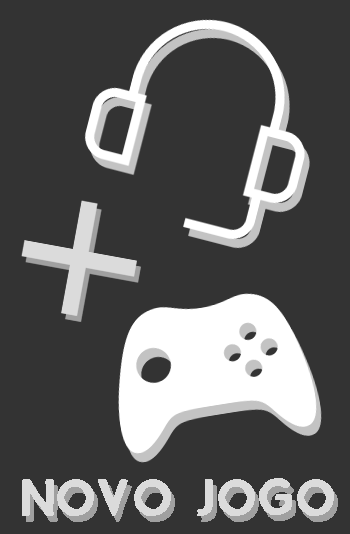
<style>
.page{position:relative;width:350px;height:534px;background:#333333}
.page>*{position:absolute;margin:0}
.t1{font:52.1px "Bizon";color:#dbdbdb;font-weight:bold}
</style>
<div class="page">
<p class="t1" style="left:22px;top:478px;width:312px;height:38px">NOVO JOGO</p>
</div>
